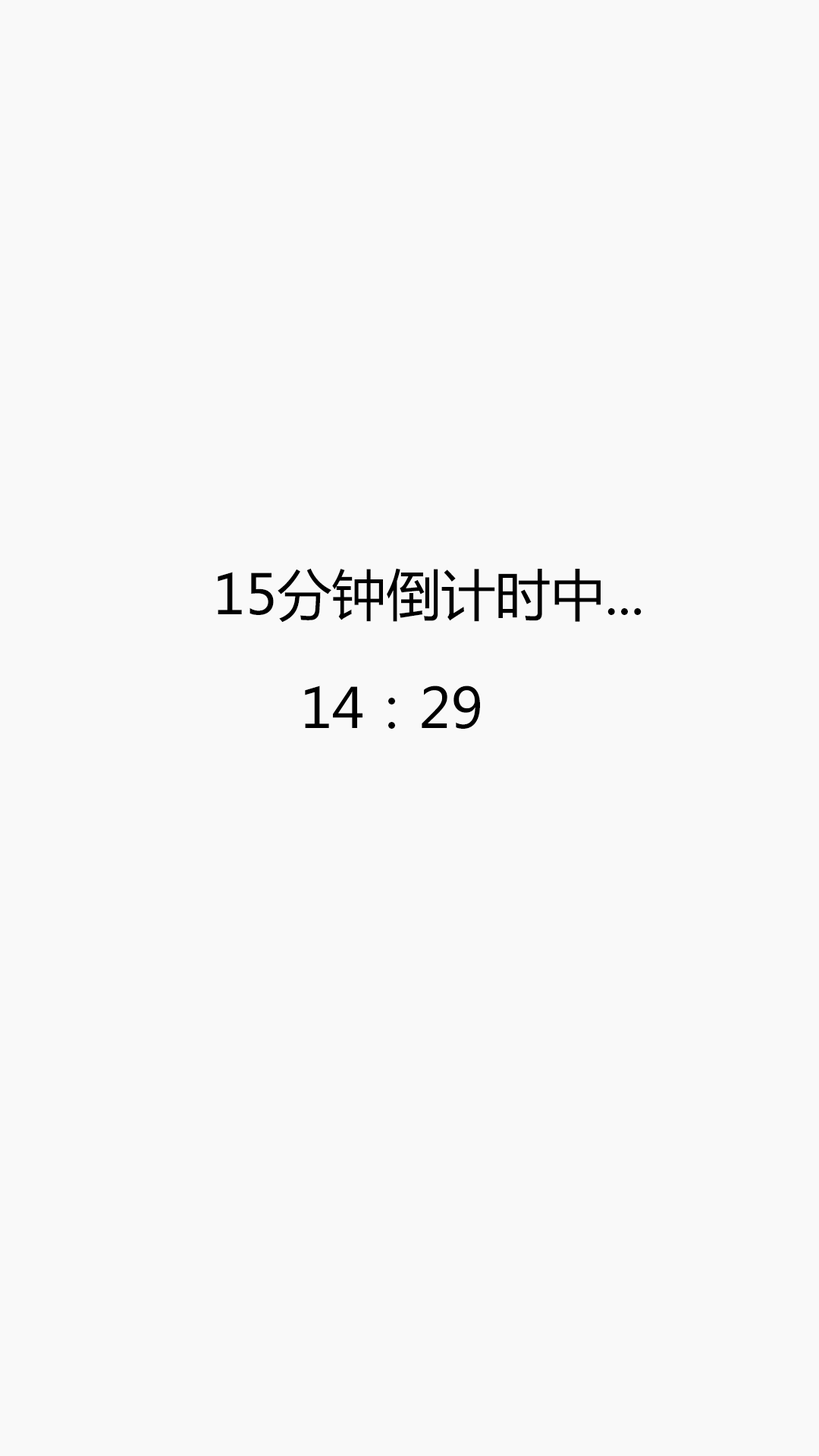
<style>
.page{position:relative;width:819px;height:1456px;background:#f9f9f9}
.page>*{position:absolute;margin:0}
.t1{font:54.6px "MicrosoftYaHei";color:#000000}
</style>
<div class="page">
<p class="t1" style="left:218px;top:568px;width:424px;height:55px">15分钟倒计时中...</p>
<p class="t1" style="left:305px;top:686px;width:175px;height:43px">14：29</p>
</div>
